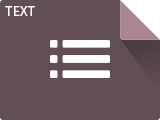
<style>
.page{position:relative;width:160px;height:120px;background:#624e55}
.page>*{position:absolute;margin:0}
.t1{font:14px "FiraSans-Regular";color:#ffffff}
</style>
<div class="page">
<p class="t1" style="left:5px;top:6px;width:30px;height:10px">TEXT</p>
</div>
